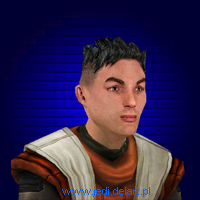
<style>
.page{position:relative;width:200px;height:200px}
.page>*{position:absolute;margin:0}
.t1{font:11px "ArialMT";color:#0066ff}
</style>
<div class="page">
<p class="t1" style="left:62px;top:187px;width:88px;height:10px">www.jedi.delart.pl</p>
</div>
